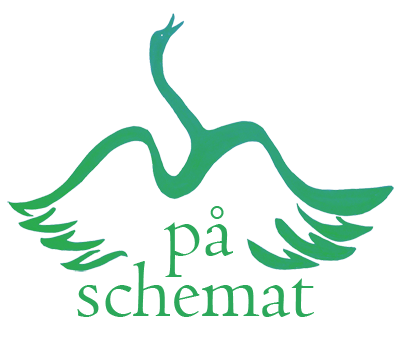
<style>
.page{position:relative;width:400px;height:350px;background:#ffffff}
.page>*{position:absolute;margin:0}
.t1{font:82px "Centaur";color:#2ca85a}
</style>
<div class="page">
<p class="t1" style="left:164px;top:206px;width:69px;height:71px">på</p>
<p class="t1" style="left:77px;top:261px;width:237px;height:56px">schemat</p>
</div>
